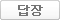
<style>
.page{position:relative;width:60px;height:20px;background:#ffffff}
.page>*{position:absolute;margin:0}
.t1{font:12px "Dotum";color:#757575;font-weight:bold}
</style>
<div class="page">
<p class="t1" style="left:18px;top:5px;width:25px;height:11px">답장</p>
</div>
